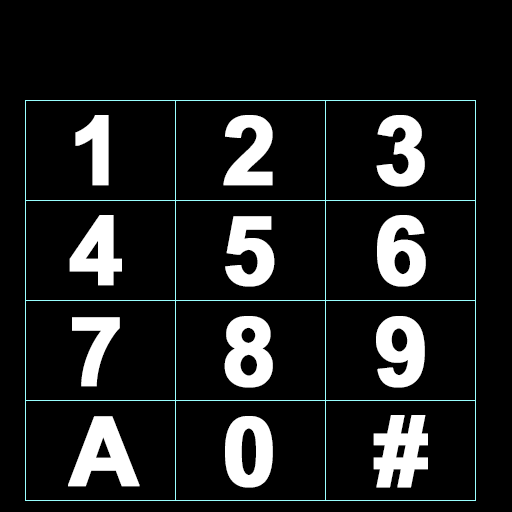
<style>
.page{position:relative;width:512px;height:512px;background:#000000}
.page>*{position:absolute;margin:0}
.t1{font:96px "Arial-BoldMT";letter-spacing:-0.05em;color:#ffffff;font-weight:bold}
</style>
<div class="page">
<p class="t1" style="left:75px;top:115px;width:34px;height:71px">1</p>
<p class="t1" style="left:223px;top:115px;width:50px;height:71px">2</p>
<p class="t1" style="left:376px;top:115px;width:49px;height:72px">3</p>
<p class="t1" style="left:69px;top:215px;width:53px;height:71px">4</p>
<p class="t1" style="left:225px;top:216px;width:50px;height:71px">5</p>
<p class="t1" style="left:377px;top:215px;width:49px;height:72px">6</p>
<p class="t1" style="left:72px;top:317px;width:48px;height:70px">7</p>
<p class="t1" style="left:224px;top:316px;width:49px;height:72px">8</p>
<p class="t1" style="left:376px;top:316px;width:49px;height:72px">9</p>
<p class="t1" style="left:68px;top:416px;width:72px;height:71px">A</p>
<p class="t1" style="left:225px;top:416px;width:48px;height:72px">0</p>
<p class="t1" style="left:373px;top:415px;width:55px;height:73px">#</p>
</div>
